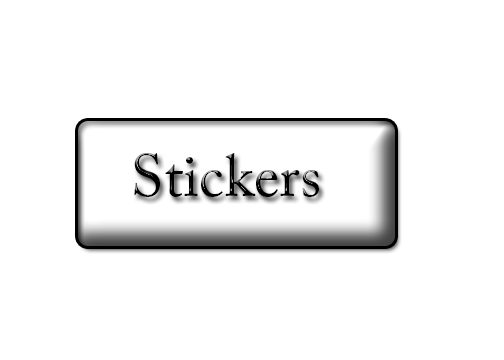
<style>
.page{position:relative;width:504px;height:360px;background:#ffffff}
.page>*{position:absolute;margin:0}
.t1{font:60px "ACaslonPro-Regular";color:#000000}
</style>
<div class="page">
<p class="t1" style="left:134px;top:153px;width:185px;height:44px">Stickers</p>
</div>
